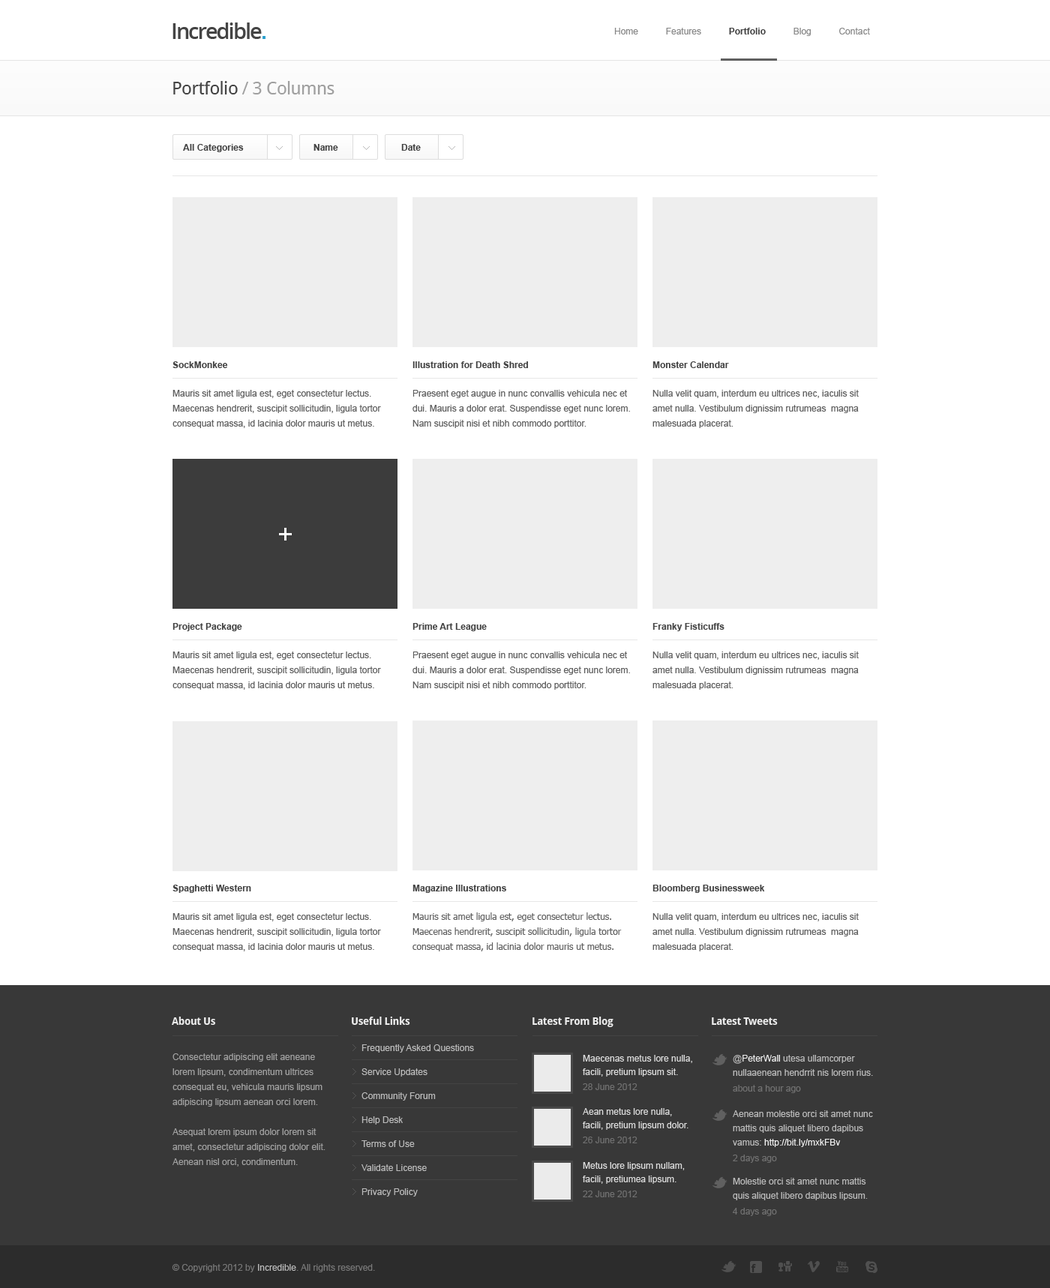
<style>
.page{position:relative;width:1050px;height:1288px;background:#ffffff}
.page>*{position:absolute;margin:0}
.t1{font:21.7px "OpenSans-Semibold";letter-spacing:-0.07em;color:#444444}
.t2{font:9px "ArialMT";color:#888888}
.t3{font:9px "Arial-BoldMT";color:#444444}
.t4{font:18px "DroidSans";letter-spacing:-0.025em;color:#a0a0a0}
.t5{font:18px "DroidSans";letter-spacing:-0.025em;color:#444444}
.t6{font:9px/15px "ArialMT";color:#606060}
.t7{font:9px/13.5px "Arial-BoldMT";color:#444444}
.t8{font:9px/13.5px "Arial-BoldMT";color:#464646}
.t9{font:9px/15px "Tahoma";color:#606060}
.t10{font:10.5px "DroidSans-Bold";letter-spacing:-0.025em;color:#ffffff}
.t11{font:9px/24px "ArialMT";color:#bbbbbb}
.t12{font:9px/15px "ArialMT";color:#a1a1a1}
.t13{font:9px/13.5px "ArialMT";color:#dddddd}
.t14{font:9px/15px "ArialMT";color:#707070}
.t15{font:9px/14.2px "ArialMT";color:#bbbbbb}
.t16{font:9px/14.2px "ArialMT";color:#eeeeee}
.t17{font:9px/15.7px "ArialMT";color:#707070}
.t18{font:9px/14.2px "ArialMT";color:#aaaaaa}
.t19{font:9px "ArialMT";color:#777777}
.t20{font:9px "ArialMT";color:#bbbbbb}
</style>
<div class="page">
<p class="t1" style="left:172px;top:22px;width:90px;height:17px">Incredible</p>
<p class="t2" style="left:614px;top:28px;width:256px;height:8px">Home           Features           <span class="t3">Portfolio           </span>Blog           Contact</p>
<p class="t4" style="left:173px;top:81px;width:161px;height:13px"><span class="t5">Portfolio </span>/ 3 Columns</p>
<p class="t3" style="left:183px;top:144px;width:61px;height:8px">All Categories</p>
<p class="t3" style="left:313px;top:144px;width:25px;height:7px">Name</p>
<p class="t3" style="left:401px;top:144px;width:20px;height:7px">Date</p>
<p class="t6" style="left:172px;top:361px;width:209px;height:67px"><span class="t7">SockMonkee<br><br></span>Mauris sit amet ligula est, eget consectetur lectus. Maecenas hendrerit, suscipit sollicitudin, ligula tortor consequat massa, id lacinia dolor mauris ut metus.</p>
<p class="t6" style="left:412px;top:361px;width:218px;height:67px"><span class="t7">Illustration for Death Shred<br><br></span>Praesent eget augue in nunc convallis vehicula nec et dui. Mauris a dolor erat. Suspendisse eget nunc lorem. Nam suscipit nisi et nibh commodo porttitor.</p>
<p class="t6" style="left:652px;top:361px;width:207px;height:67px"><span class="t7">Monster Calendar<br><br></span>Nulla velit quam, interdum eu ultrices nec, iaculis sit amet nulla. Vestibulum dignissim rutrumeas  magna malesuada placerat.</p>
<p class="t6" style="left:172px;top:623px;width:209px;height:67px"><span class="t7">Project Package<br><br></span>Mauris sit amet ligula est, eget consectetur lectus. Maecenas hendrerit, suscipit sollicitudin, ligula tortor consequat massa, id lacinia dolor mauris ut metus.</p>
<p class="t6" style="left:412px;top:623px;width:218px;height:67px"><span class="t7">Prime Art League<br><br></span>Praesent eget augue in nunc convallis vehicula nec et dui. Mauris a dolor erat. Suspendisse eget nunc lorem. Nam suscipit nisi et nibh commodo porttitor.</p>
<p class="t6" style="left:652px;top:623px;width:207px;height:67px"><span class="t8">Franky Fisticuffs<br><br></span>Nulla velit quam, interdum eu ultrices nec, iaculis sit amet nulla. Vestibulum dignissim rutrumeas  magna malesuada placerat.</p>
<p class="t6" style="left:172px;top:885px;width:209px;height:67px"><span class="t7">Spaghetti Western<br><br></span>Mauris sit amet ligula est, eget consectetur lectus. Maecenas hendrerit, suscipit sollicitudin, ligula tortor consequat massa, id lacinia dolor mauris ut metus.</p>
<p class="t9" style="left:412px;top:885px;width:210px;height:67px"><span class="t7">Magazine Illustrations<br><br></span>Mauris sit amet ligula est, eget consectetur lectus. Maecenas hendrerit, suscipit sollicitudin, ligula tortor consequat massa, id lacinia dolor mauris ut metus.</p>
<p class="t6" style="left:652px;top:885px;width:207px;height:67px"><span class="t7">Bloomberg Businessweek<br><br></span>Nulla velit quam, interdum eu ultrices nec, iaculis sit amet nulla. Vestibulum dignissim rutrumeas  magna malesuada placerat.</p>
<p class="t10" style="left:172px;top:1017px;width:43px;height:8px;opacity:0.9">About Us</p>
<p class="t10" style="left:352px;top:1017px;width:58px;height:8px;opacity:0.9">Useful Links</p>
<p class="t10" style="left:532px;top:1017px;width:81px;height:10px;opacity:0.9">Latest From Blog</p>
<p class="t10" style="left:712px;top:1018px;width:66px;height:7px;opacity:0.9">Latest Tweets</p>
<p class="t11" style="left:361px;top:1045px;width:113px;height:152px">Frequently Asked Questions<br>Service Updates<br>Community Forum<br>Help Desk<br>Terms of Use<br>Validate License<br>Privacy Policy</p>
<p class="t12" style="left:172px;top:1054px;width:153px;height:113px">Consectetur adipiscing elit aeneane lorem lipsum, condimentum ultrices consequat eu, vehicula mauris lipsum adipiscing lipsum aenean orci lorem.<br> <br>Asequat lorem ipsum dolor lorem sit amet, consectetur adipiscing dolor elit. Aenean nisl orci, condimentum.</p>
<p class="t13" style="left:583px;top:1055px;width:109px;height:35px">Maecenas metus lore nulla, facili, pretium lipsum sit.<br><span class="t14">28 June 2012</span></p>
<p class="t15" style="left:733px;top:1055px;width:140px;height:38px">@<span class="t16">PeterWall </span>utesa ullamcorper nullaaenean hendrrit nis lorem rius.<br><span class="t17">about a hour ago</span></p>
<p class="t13" style="left:583px;top:1108px;width:105px;height:36px">Aean metus lore nulla, facili, pretium lipsum dolor.<br><span class="t14">26 June 2012</span></p>
<p class="t15" style="left:733px;top:1111px;width:140px;height:52px">Aenean molestie orci sit amet nunc mattis quis aliquet libero dapibus vamus: <span class="t16">http://bit.ly/mxkFBv<br></span><span class="t17">2 days ago</span></p>
<p class="t13" style="left:583px;top:1162px;width:102px;height:36px">Metus lore lipsum nullam, facili, pretiumea lipsum.<br><span class="t14">22 June 2012</span></p>
<p class="t15" style="left:733px;top:1178px;width:135px;height:38px">Molestie orci sit amet nunc mattis quis aliquet libero dapibus lipsum<span class="t18">.<br></span><span class="t17">4 days ago</span></p>
<p class="t19" style="left:172px;top:1264px;width:203px;height:9px">© Copyright 2012 by <span class="t20">Incredible</span>. All rights reserved.</p>
</div>
